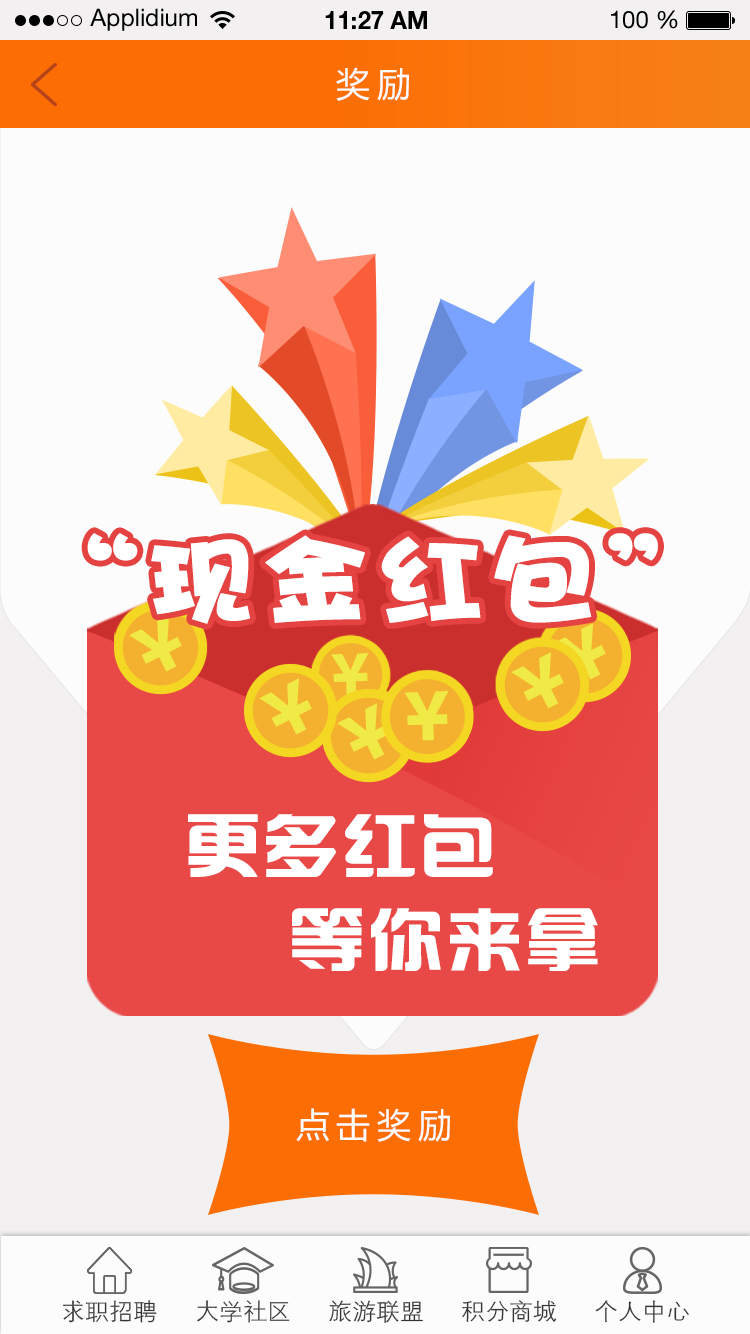
<style>
.page{position:relative;width:750px;height:1334px;background:#fcfcfc}
.page>*{position:absolute;margin:0}
.t1{font:24px "HelveticaNeueLTStd-Roman";color:#000000}
.t2{font:24px "HelveticaNeueLTStd-Bd";color:#000000}
.t3{font:34px "MicrosoftYaHei";letter-spacing:0.2em;color:#fcfcfc}
.t4{font:97.2px "DFHaiBaoW12";letter-spacing:0.06em;color:#ffffff;scale:1.12 1}
.t5{font:68.1px "¹ã½Ý¾ÓÃÔÄã×Ö¿â";letter-spacing:0.04em;color:#ffffff;scale:1.11 1}
.t6{font:24px "JXiHei";color:#333333}
</style>
<div class="page">
<p class="t1" style="left:90px;top:8px;width:107px;height:23px">Applidium</p>
<p class="t2" style="left:325px;top:11px;width:102px;height:18px">11:27 AM</p>
<p class="t1" style="left:611px;top:10px;width:67px;height:19px">100 %</p>
<p class="t3" style="left:336px;top:67px;width:73px;height:34px">奖励</p>
<p class="t4" style="left:87px;top:533px;width:571px;height:91px">“现金红包”</p>
<p class="t5" style="left:188px;top:814px;width:305px;height:63px">更多红包</p>
<p class="t5" style="left:292px;top:908px;width:306px;height:63px">等你来拿</p>
<p class="t3" style="left:296px;top:1108px;width:154px;height:34px">点击奖励</p>
<p class="t6" style="left:63px;top:1300px;width:94px;height:23px">求职招聘</p>
<p class="t6" style="left:197px;top:1300px;width:93px;height:23px">大学社区</p>
<p class="t6" style="left:329px;top:1300px;width:94px;height:23px">旅游联盟</p>
<p class="t6" style="left:462px;top:1300px;width:95px;height:23px">积分商城</p>
<p class="t6" style="left:595px;top:1300px;width:94px;height:23px">个人中心</p>
</div>
